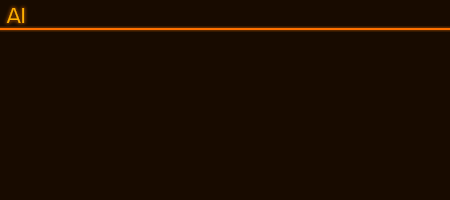
<style>
.page{position:relative;width:450px;height:200px;background:#180b00}
.page>*{position:absolute;margin:0}
.t1{font:23px "Eurostile-Roman";color:#ffb000}
</style>
<div class="page">
<p class="t1" style="left:6px;top:8px;width:19px;height:15px">AI</p>
</div>
